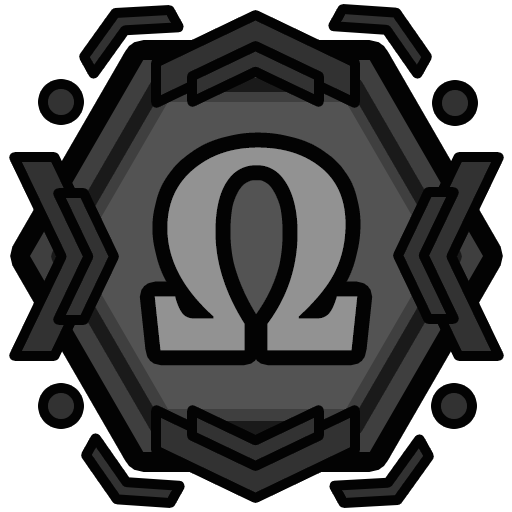
<style>
.page{position:relative;width:512px;height:512px;background:#030303}
.page>*{position:absolute;margin:0}
.t1{font:300px "Cambria-Bold";color:#929292}
</style>
<div class="page">
<p class="t1" style="left:154px;top:147px;width:204px;height:204px">Ω</p>
</div>
